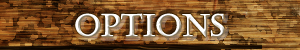
<style>
.page{position:relative;width:300px;height:50px}
.page>*{position:absolute;margin:0}
.t1{font:30px "Castellar";color:#ffffff;font-weight:bold}
</style>
<div class="page">
<p class="t1" style="left:75px;top:13px;width:150px;height:24px">Options</p>
</div>
